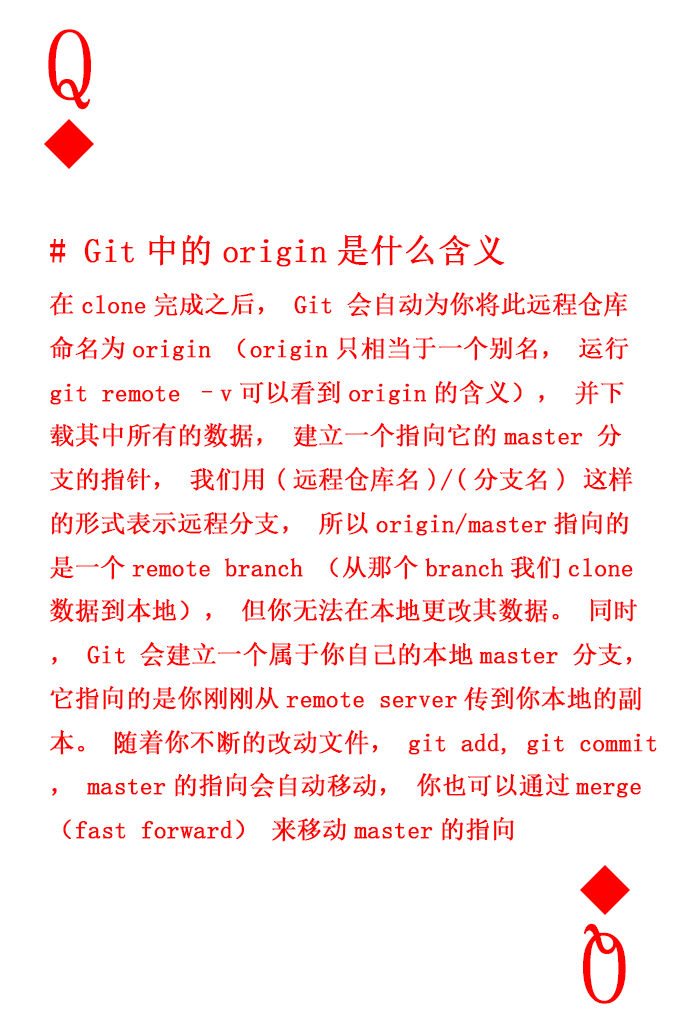
<style>
.page{position:relative;width:673px;height:1028px;background:#ffffff}
.page>*{position:absolute;margin:0}
.t1{font:104.2px "SimSun-ExtB";color:#ff0101;scale:0.93 1}
.t2{font:25px "SimSun";color:#ff0101;font-weight:bold}
.t3{font:33.3px "SimSun";color:#ff0101;font-weight:bold}
</style>
<div class="page">
<p class="t1" style="left:48px;top:29px;width:43px;height:81px">Q</p>
<p class="t2" style="left:49px;top:235px;width:608px;height:607px"><span class="t3"># Git中的origin是什么含义<br></span>在clone完成之后，Git 会自动为你将此远程仓库<br>命名为origin（origin只相当于一个别名，运行<br>git remote –v可以看到origin的含义），并下<br>载其中所有的数据，建立一个指向它的master 分<br>支的指针，我们用(远程仓库名)/(分支名) 这样<br>的形式表示远程分支，所以origin/master指向的<br>是一个remote branch（从那个branch我们clone<br>数据到本地），但你无法在本地更改其数据。同时<br>，Git 会建立一个属于你自己的本地master 分支，<br>它指向的是你刚刚从remote server传到你本地的副<br>本。随着你不断的改动文件，git add, git commit<br>，master的指向会自动移动，你也可以通过merge<br>（fast forward）来移动master的指向</p>
<p class="t1" style="left:583px;top:923px;width:43px;height:81px;rotate:180deg">Q</p>
</div>
